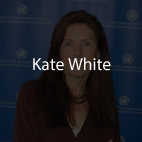
<style>
.page{position:relative;width:142px;height:142px}
.page>*{position:absolute;margin:0}
.t1{font:17.5px "MyriadPro-Regular";color:#ffffff}
</style>
<div class="page">
<p class="t1" style="left:33px;top:57px;width:78px;height:14px">Kate White</p>
</div>
